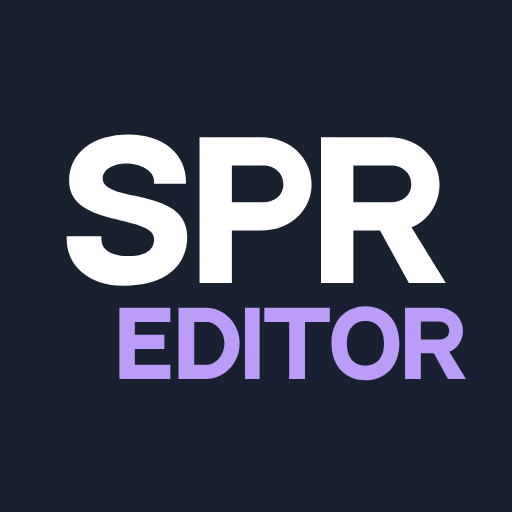
<style>
.page{position:relative;width:512px;height:512px;background:#192030}
.page>*{position:absolute;margin:0}
.t1{font:180px "NeutralFaceBold";color:#ffffff}
.t2{font:88px "NeutralFaceBold";color:#bb9cf9}
</style>
<div class="page">
<p class="t1" style="left:66px;top:134px;width:380px;height:152px">SPR</p>
<p class="t2" style="left:119px;top:306px;width:348px;height:75px">EDITOR</p>
</div>
